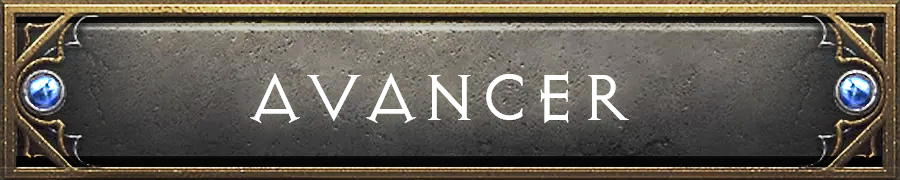
<style>
.page{position:relative;width:900px;height:180px}
.page>*{position:absolute;margin:0}
.t1{font:75px "DiabloLight";color:#ffffff}
</style>
<div class="page">
<p class="t1" style="left:250px;top:71px;width:379px;height:52px">AVANCER</p>
</div>
